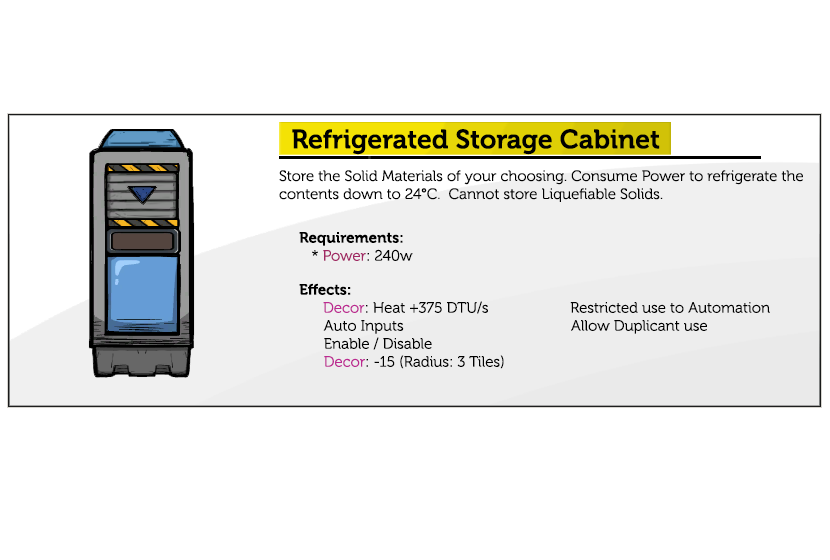
<style>
.page{position:relative;width:830px;height:560px;background:#ffffff}
.page>*{position:absolute;margin:0}
.t1{font:26.7px "Museo-700";color:#000000}
.t2{font:15px "Museo-300";color:#000000}
.t3{font:15px "Museo-700";color:#000000}
.t4{font:15px "Museo-300";color:#a12864}
.t5{font:15px "Museo-300";color:#bc2991}
</style>
<div class="page">
<p class="t1" style="left:292px;top:129px;width:368px;height:26px">Refrigerated Storage Cabinet</p>
<p class="t2" style="left:279px;top:170px;width:524px;height:32px">Store the Solid Materials of your choosing. Consume Power to refrigerate the contents down to 24°C.  Cannot store Liquefiable Solids.</p>
<p class="t3" style="left:299px;top:232px;width:114px;height:29px">Requirements:<br><span class="t2">   * </span><span class="t4">Power</span><span class="t2">: 240w</span></p>
<p class="t2" style="left:299px;top:283px;width:471px;height:86px"><span class="t3">Effects:<br>      </span><span class="t5">Decor</span>: Heat +375 DTU/s                    Restricted use to Automation<br>      Auto Inputs                                         Allow Duplicant use <br>      Enable / Disable<br>      <span class="t5">Decor</span>: -15 (Radius: 3 Tiles)</p>
</div>
